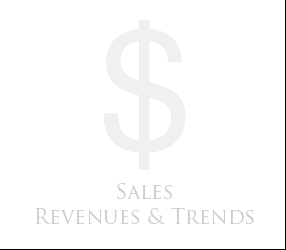
<style>
.page{position:relative;width:286px;height:250px;background:#ffffff}
.page>*{position:absolute;margin:0}
.t1{font:20.8px "TrajanPro-Regular";color:#cdcdcd}
</style>
<div class="page">
<p class="t1" style="left:35px;top:183px;width:219px;height:41px;text-align:center">Sales<br>Revenues &amp; Trends</p>
</div>
